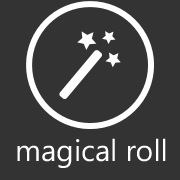
<style>
.page{position:relative;width:180px;height:180px;background:#333333}
.page>*{position:absolute;margin:0}
.t1{font:30px "SegoeWP";color:#ffffff}
</style>
<div class="page">
<p class="t1" style="left:17px;top:138px;width:149px;height:30px">magical roll</p>
</div>
